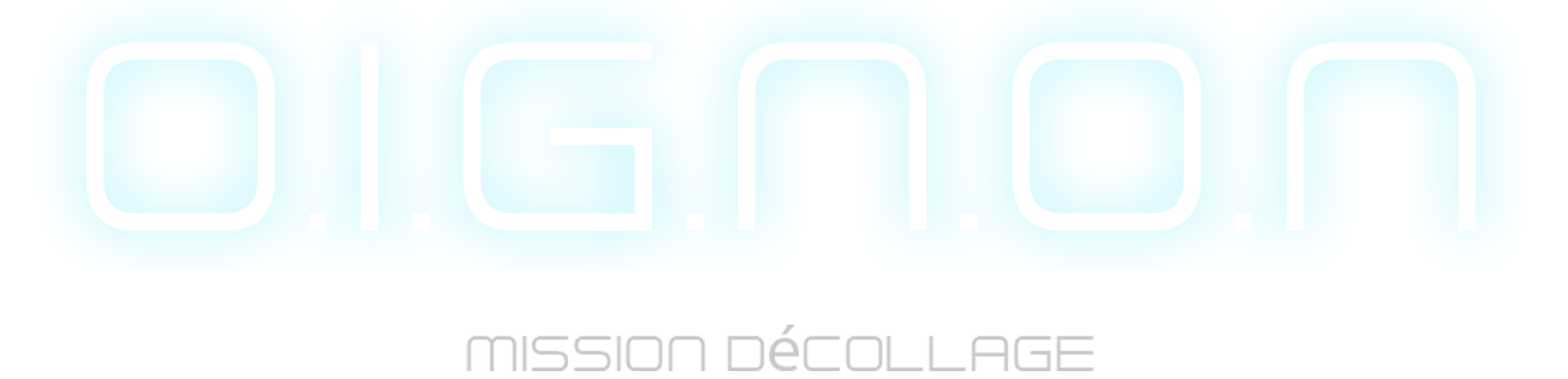
<style>
.page{position:relative;width:1568px;height:379px;background:#ffffff}
.page>*{position:absolute;margin:0}
.t1{font:351.2px "FuturisticArmour";color:#ffffff}
.t2{font:66.5px "FuturisticArmour";color:#c8c8c8}
.t3{font:66.5px "MyriadPro-Regular";color:#c8c8c8}
</style>
<div class="page">
<p class="t1" style="left:86px;top:42px;width:1390px;height:189px">O.I.G.N.O.N</p>
<p class="t2" style="left:466px;top:324px;width:628px;height:47px">mission d<span class="t3">é</span>collage</p>
</div>
